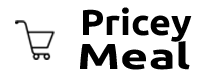
<style>
.page{position:relative;width:200px;height:83px;background:#ffffff}
.page>*{position:absolute;margin:0}
.t1{font:36px "Ubuntu-Bold";color:#000000;scale:1.05 1}
.t2{font:36px "Ubuntu-Bold";color:#000000;scale:1.34 1}
</style>
<div class="page">
<p class="t1" style="left:83px;top:7px;width:109px;height:35px">Pricey</p>
<p class="t2" style="left:80px;top:41px;width:110px;height:29px">Meal</p>
</div>
